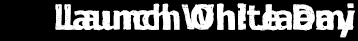
<style>
.page{position:relative;width:358px;height:41px;background:#000000}
.page>*{position:absolute;margin:0}
.t1{font:36px "Deadend";color:#ffffff}
</style>
<div class="page">
<p class="t1" style="left:55px;top:3px;width:300px;height:35px">Launch White Day</p>
<p class="t1" style="left:64px;top:3px;width:290px;height:28px">Launch Oh! Jaemi</p>
</div>
